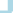
<style>
.page{position:relative;width:16px;height:13px;background:#ffffff}
.page>*{position:absolute;margin:0}
.t1{font:15.6px "8BITWONDERNominal";color:#add8e6}
</style>
<div class="page">
<p class="t1" style="left:0px;top:0px;width:13px;height:13px">j</p>
</div>
